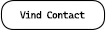
<style>
.page{position:relative;width:106px;height:30px;background:#ffffff}
.page>*{position:absolute;margin:0}
.t1{font:10px "CascadiaCode";letter-spacing:-0.05em;color:#000000}
</style>
<div class="page">
<p class="t1" style="left:20px;top:10px;width:65px;height:9px">Vind Contact</p>
</div>
